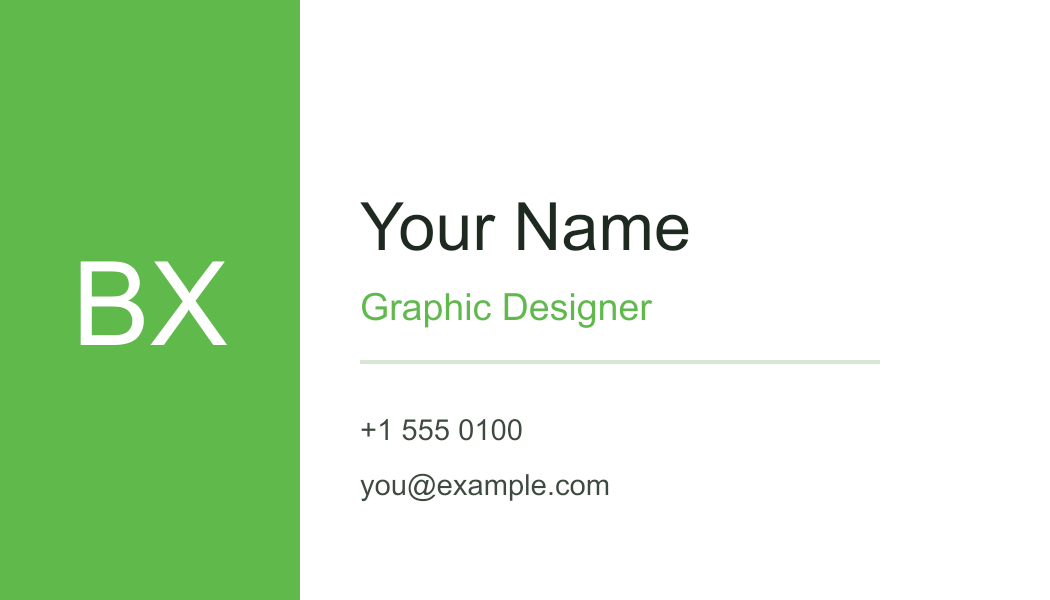
<style>
.page{position:relative;width:1050px;height:600px;background:#ffffff}
.page>*{position:absolute;margin:0}
.t1{font:66.7px "ArialMT";color:#1e2a1f}
.t2{font:116.7px "ArialMT";color:#ffffff}
.t3{font:37.5px "ArialMT";color:#5fb94b}
.t4{font:29.2px "ArialMT";color:#3d4a3e}
</style>
<div class="page">
<p class="t1" style="left:359px;top:202px;width:331px;height:50px">Your Name</p>
<p class="t2" style="left:79px;top:261px;width:150px;height:85px">BX</p>
<p class="t3" style="left:361px;top:292px;width:293px;height:37px">Graphic Designer</p>
<p class="t4" style="left:360px;top:419px;width:163px;height:23px">+1 555 0100</p>
<p class="t4" style="left:359px;top:473px;width:251px;height:30px">you@example.com</p>
</div>
